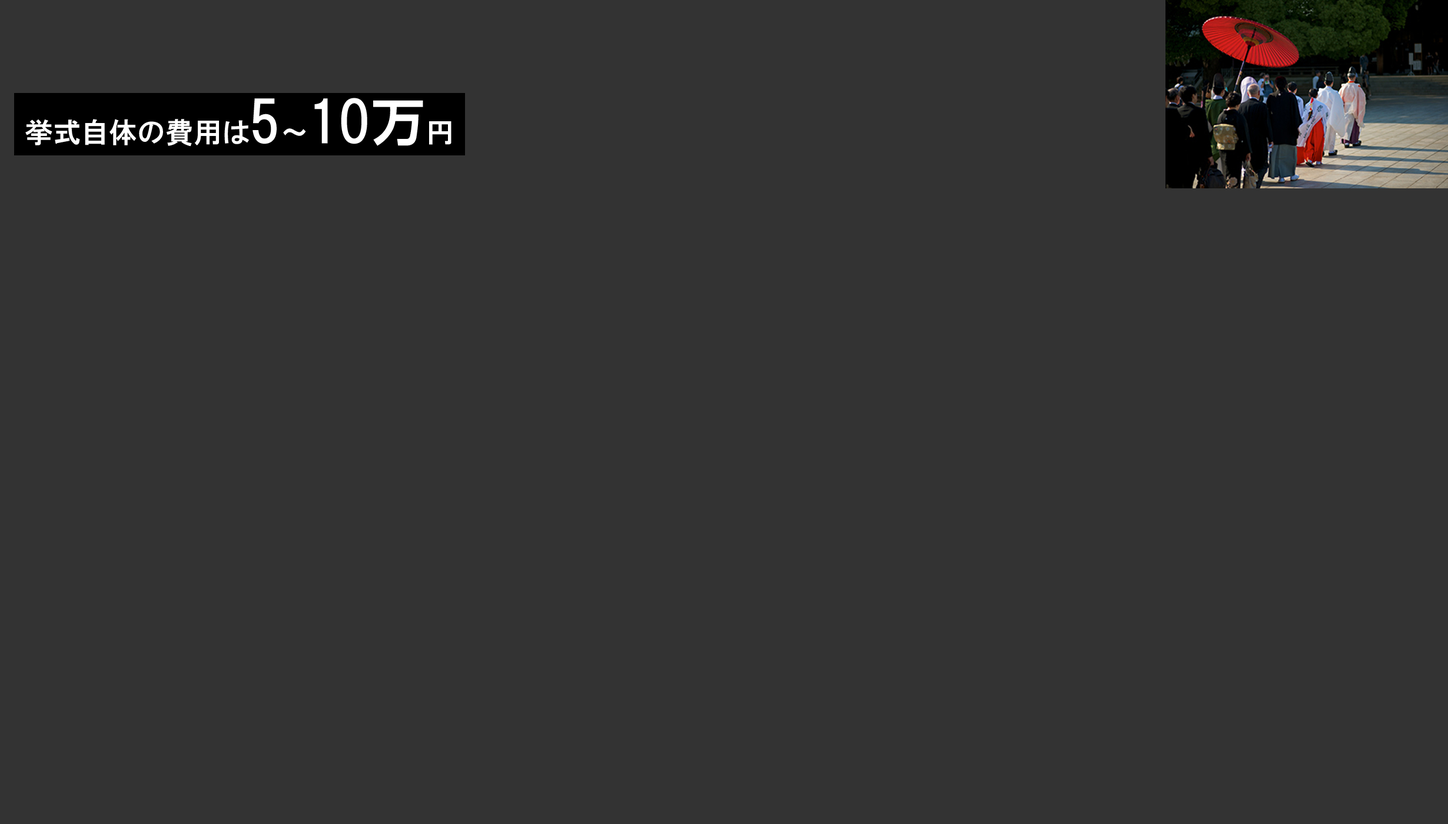
<style>
.page{position:relative;width:1448px;height:824px;background:#333333}
.page>*{position:absolute;margin:0}
.t1{font:28.1px "HGSGothicE";color:#ffffff}
.t2{font:56.3px "HGSGothicE";color:#ffffff}
</style>
<div class="page">
<p class="t1" style="left:25px;top:98px;width:426px;height:49px">挙式自体の費用は<span class="t2">5</span>～<span class="t2">10万</span>円</p>
</div>
